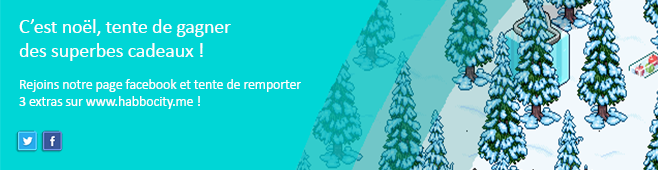
<style>
.page{position:relative;width:658px;height:170px;background:#00d6d6}
.page>*{position:absolute;margin:0}
.t1{font:20px "Calibri";letter-spacing:-0.01em;color:#ffffff}
.t2{font:14px "Calibri";letter-spacing:-0.01em;color:#ffffff}
</style>
<div class="page">
<p class="t1" style="left:19px;top:19px;width:212px;height:42px">C’est noël, tente de gagner<br>des superbes cadeaux !</p>
<p class="t2" style="left:19px;top:79px;width:282px;height:30px">Rejoins notre page facebook et tente de remporter<br>3 extras sur www.habbocity.me !</p>
</div>
